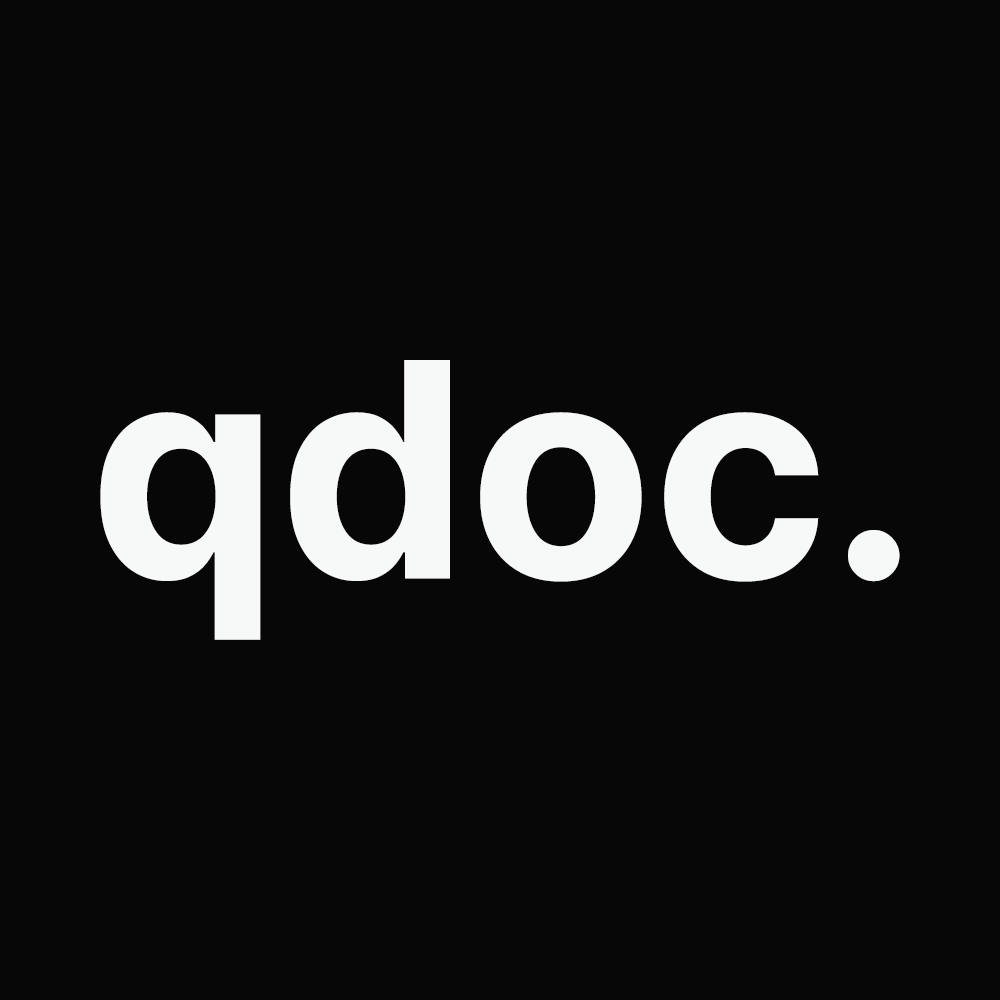
<style>
.page{position:relative;width:1000px;height:1000px;background:#080708}
.page>*{position:absolute;margin:0}
.t1{font:300px "Inter-Bold";color:#f7f9f9}
</style>
<div class="page">
<p class="t1" style="left:100px;top:360px;width:800px;height:280px">qdoc.</p>
</div>
